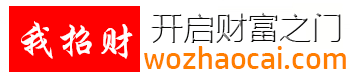
<style>
.page{position:relative;width:350px;height:76px;background:#ffffff}
.page>*{position:absolute;margin:0}
.t1{font:40px "STXingkai";color:#fffefe}
.t2{font:32px "HPSimplified-Regular";color:#ff7e00}
</style>
<div class="page">
<p class="t1" style="left:21px;top:21px;width:112px;height:38px">我招财</p>
<p class="t2" style="left:144px;top:46px;width:202px;height:23px">wozhaocai.com</p>
</div>
